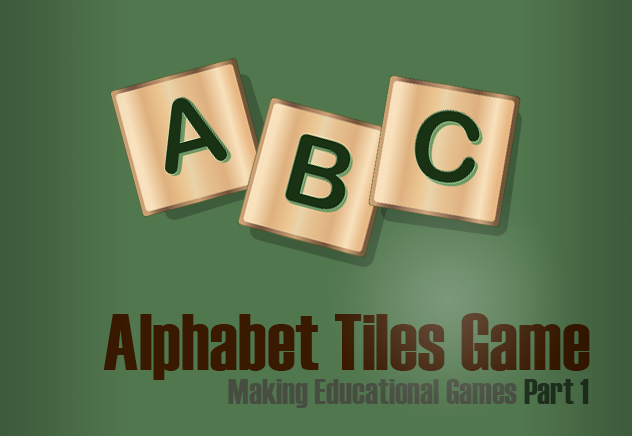
<style>
.page{position:relative;width:632px;height:436px;background:#51774e}
.page>*{position:absolute;margin:0}
.t1{font:80px "Haettenschweiler";color:#391900}
.t2{font:36px "Haettenschweiler";color:#c60022}
.t3{font:36px "Haettenschweiler";color:#474e41}
</style>
<div class="page">
<p class="t1" style="left:103px;top:313px;width:487px;height:67px"><span class="t2"><br></span>Alphabet Tiles Game</p>
<p class="t3" style="left:228px;top:379px;width:361px;height:29px">Making Educational Games Part 1</p>
</div>
